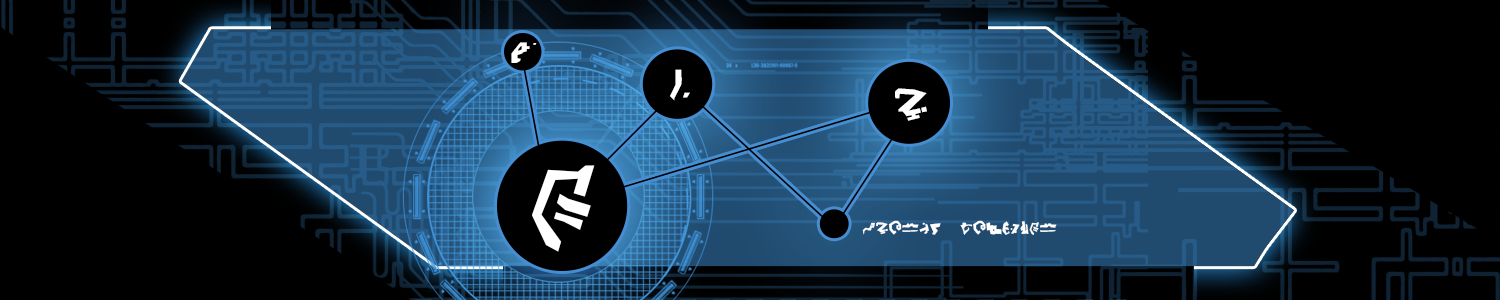
<style>
.page{position:relative;width:1500px;height:300px;background:#000000}
.page>*{position:absolute;margin:0}
.t1{font:43.8px "DestronicGrafitti";color:#ffffff;font-variant:small-caps}
.t2{font:64.7px "DestronicGrafitti";color:#ffffff;font-variant:small-caps}
.t3{font:158.4px "DestronicGrafitti";color:#ffffff;font-variant:small-caps}
.t4{font:23.4px "DestronicGrafitti";color:#ffffff;font-variant:small-caps}
</style>
<div class="page">
<p class="t1" style="left:511px;top:42px;width:26px;height:21px">b</p>
<p class="t2" style="left:670px;top:69px;width:20px;height:32px">y</p>
<p class="t2" style="left:895px;top:88px;width:32px;height:33px">k</p>
<p class="t3" style="left:532px;top:165px;width:63px;height:87px">e</p>
<p class="t4" style="left:862px;top:220px;width:195px;height:15px">ikarus candomer</p>
</div>
